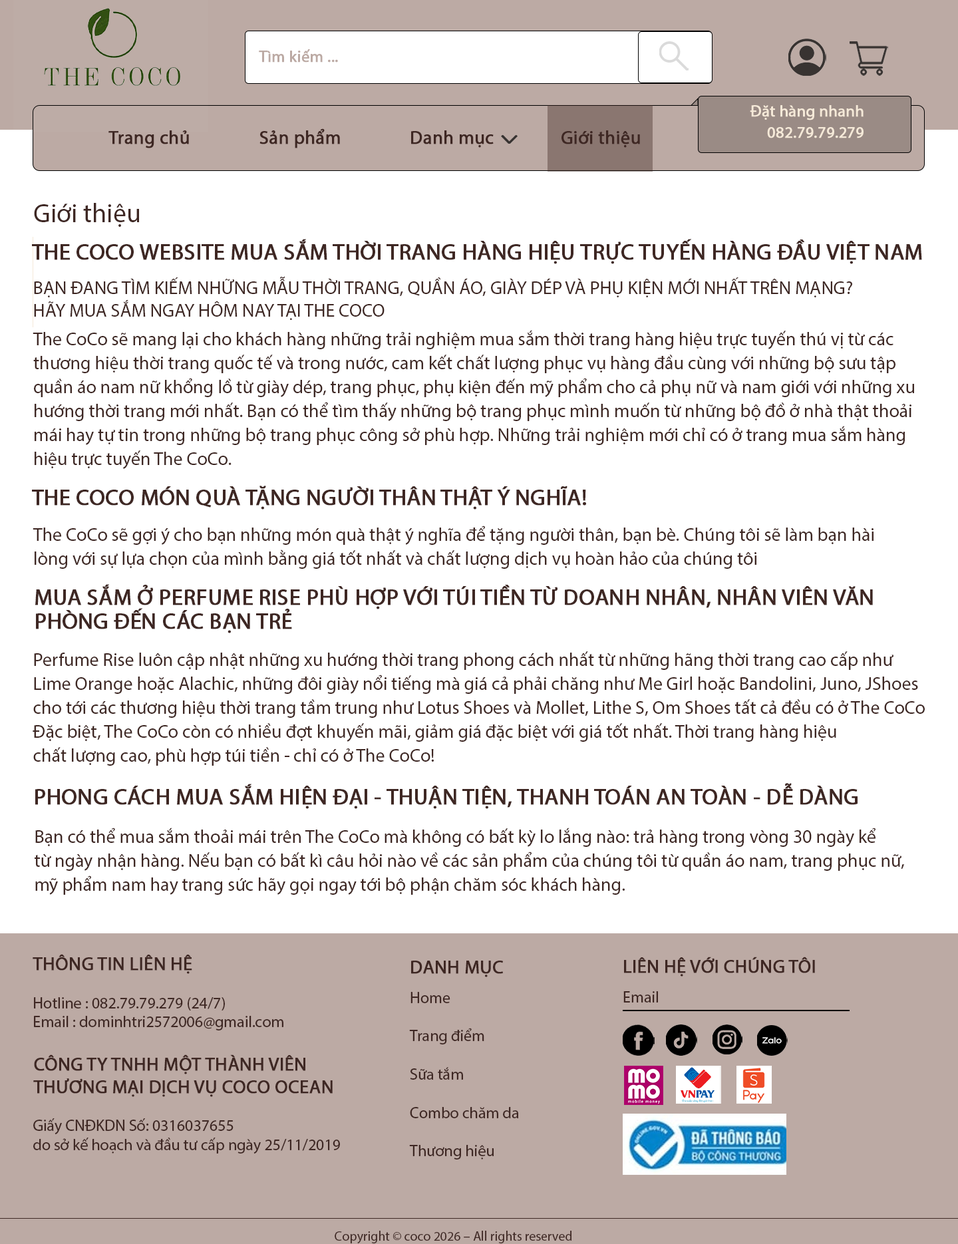
<style>
.page{position:relative;width:958px;height:1244px;background:#ffffff}
.page>*{position:absolute;margin:0}
.t1{font:16px "MyriadPro-Regular";color:#bcaaa4;font-weight:bold}
.t2{font:16px "MyriadPro-Regular";color:#f5e9d8;font-weight:bold}
.t3{font:18.6px "MyriadPro-Regular";color:#3e2723;font-weight:bold}
.t4{font:26.6px "MyriadPro-Regular";color:#3e2723}
.t5{font:22.6px "MyriadPro-Regular";color:#3e2723;font-weight:bold}
.t6{font:18.6px "MyriadPro-Regular";color:#3e2723}
.t7{font:18.6px/24px "MyriadPro-Regular";color:#3e2723}
.t8{font:22.6px/24px "MyriadPro-Regular";color:#3e2723;font-weight:bold}
.t9{font:16px "MyriadPro-Regular";color:#3e2723}
.t10{font:13.3px "MyriadPro-Regular";color:#3e2723}
</style>
<div class="page">
<p class="t1" style="left:259px;top:49px;width:79px;height:14px">Tìm kiếm ...</p>
<p class="t2" style="left:750px;top:105px;width:114px;height:15px">Đặt hàng nhanh</p>
<p class="t3" style="left:108px;top:130px;width:81px;height:18px">Trang chủ</p>
<p class="t3" style="left:260px;top:128px;width:80px;height:20px">Sản phẩm</p>
<p class="t3" style="left:411px;top:130px;width:83px;height:18px">Danh mục</p>
<p class="t3" style="left:562px;top:130px;width:78px;height:18px">Giới thiệu</p>
<p class="t2" style="left:767px;top:127px;width:97px;height:11px">082.79.79.279</p>
<p class="t4" style="left:34px;top:203px;width:106px;height:24px">Giới thiệu</p>
<p class="t5" style="left:32px;top:239px;width:890px;height:25px">THE COCO WEBSITE MUA SẮM THỜI TRANG HÀNG HIỆU TRỰC TUYẾN HÀNG ĐẦU VIỆT NAM</p>
<p class="t6" style="left:34px;top:276px;width:818px;height:44px">BẠN ĐANG TÌM KIẾM NHỮNG MẪU THỜI TRANG, QUẦN ÁO, GIÀY DÉP VÀ PHỤ KIỆN MỚI NHẤT TRÊN MẠNG?<br>HÃY MUA SẮM NGAY HÔM NAY TẠI THE COCO</p>
<p class="t7" style="left:33px;top:330px;width:881px;height:139px">The CoCo sẽ mang lại cho khách hàng những trải nghiệm mua sắm thời trang hàng hiệu trực tuyến thú vị từ các <br>thương hiệu thời trang quốc tế và trong nước, cam kết chất lượng phục vụ hàng đầu cùng với những bộ sưu tập <br>quần áo nam nữ khổng lồ từ giày dép, trang phục, phụ kiện đến mỹ phẩm cho cả phụ nữ và nam giới với những xu <br>hướng thời trang mới nhất. Bạn có thể tìm thấy những bộ trang phục mình muốn từ những bộ đồ ở nhà thật thoải <br>mái hay tự tin trong những bộ trang phục công sở phù hợp. Những trải nghiệm mới chỉ có ở trang mua sắm hàng<br>hiệu trực tuyến The CoCo.</p>
<p class="t5" style="left:32px;top:486px;width:554px;height:24px">THE COCO MÓN QUÀ TẶNG NGƯỜI THÂN THẬT Ý NGHĨA!</p>
<p class="t7" style="left:33px;top:526px;width:841px;height:43px">The CoCo sẽ gợi ý cho bạn những món quà thật ý nghĩa để tặng người thân, bạn bè. Chúng tôi sẽ làm bạn hài <br>lòng với sự lựa chọn của mình bằng giá tốt nhất và chất lượng dịch vụ hoàn hảo của chúng tôi</p>
<p class="t8" style="left:35px;top:584px;width:838px;height:50px">MUA SẮM Ở PERFUME RISE PHÙ HỢP VỚI TÚI TIỀN TỪ DOANH NHÂN, NHÂN VIÊN VĂN <br>PHÒNG ĐẾN CÁC BẠN TRẺ</p>
<p class="t7" style="left:33px;top:651px;width:892px;height:115px">Perfume Rise luôn cập nhật những xu hướng thời trang phong cách nhất từ những hãng thời trang cao cấp như <br>Lime Orange hoặc Alachic, những đôi giày nổi tiếng mà giá cả phải chăng như Me Girl hoặc Bandolini, Juno, JShoes <br>cho tới các thương hiệu thời trang tầm trung như Lotus Shoes và Mollet, Lithe S, Om Shoes tất cả đều có ở The CoCo<br>Đặc biệt, The CoCo còn có nhiều đợt khuyến mãi, giảm giá đặc biệt với giá tốt nhất. Thời trang hàng hiệu <br>chất lượng cao, phù hợp túi tiền - chỉ có ở The CoCo!</p>
<p class="t5" style="left:35px;top:783px;width:823px;height:26px">PHONG CÁCH MUA SẮM HIỆN ĐẠI - THUẬN TIỆN, THANH TOÁN AN TOÀN - DỄ DÀNG</p>
<p class="t7" style="left:35px;top:828px;width:869px;height:67px">Bạn có thể mua sắm thoải mái trên The CoCo mà không có bất kỳ lo lắng nào: trả hàng trong vòng 30 ngày kể <br>từ ngày nhận hàng. Nếu bạn có bất kì câu hỏi nào về các sản phẩm của chúng tôi từ quần áo nam, trang phục nữ, <br>mỹ phẩm nam hay trang sức hãy gọi ngay tới bộ phận chăm sóc khách hàng.</p>
<p class="t9" style="left:33px;top:954px;width:250px;height:77px"><span class="t3">THÔNG TIN LIÊN HỆ <br><br></span>Hotline : 082.79.79.279 (24/7)<br>Email : dominhtri2572006@gmail.com</p>
<p class="t3" style="left:411px;top:961px;width:92px;height:17px">DANH MỤC</p>
<p class="t3" style="left:624px;top:957px;width:191px;height:20px">LIÊN HỆ VỚI CHÚNG TÔI</p>
<p class="t9" style="left:409px;top:992px;width:110px;height:168px">Home <br><br>Trang điểm <br><br>Sữa tắm <br><br>Combo chăm da<br><br>Thương hiệu</p>
<p class="t9" style="left:624px;top:992px;width:34px;height:11px">Email</p>
<p class="t3" style="left:33px;top:1055px;width:300px;height:42px">CÔNG TY TNHH MỘT THÀNH VIÊN <br>THƯƠNG MẠI DỊCH VỤ COCO OCEAN</p>
<p class="t9" style="left:33px;top:1119px;width:307px;height:36px">Giấy CNĐKDN Số: 0316037655 <br>do sở kế hoạch và đầu tư cấp ngày 25/11/2019</p>
<p class="t10" style="left:335px;top:1231px;width:237px;height:13px">Copyright © coco 2026 – All rights reserved</p>
</div>
